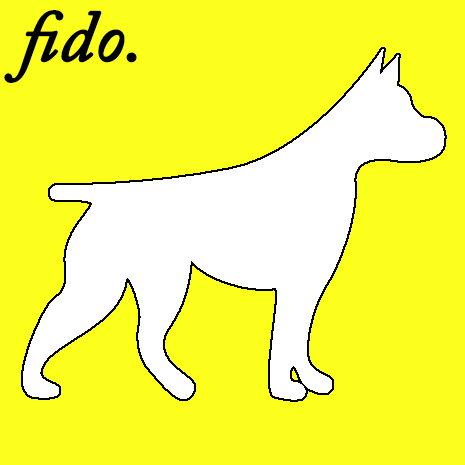
<style>
.page{position:relative;width:465px;height:465px;background:#fcff1b}
.page>*{position:absolute;margin:0}
.t1{font:72px "ACaslonPro-Italic";color:#000000;font-weight:bold}
</style>
<div class="page">
<p class="t1" style="left:4px;top:10px;width:133px;height:73px">fido.</p>
</div>
